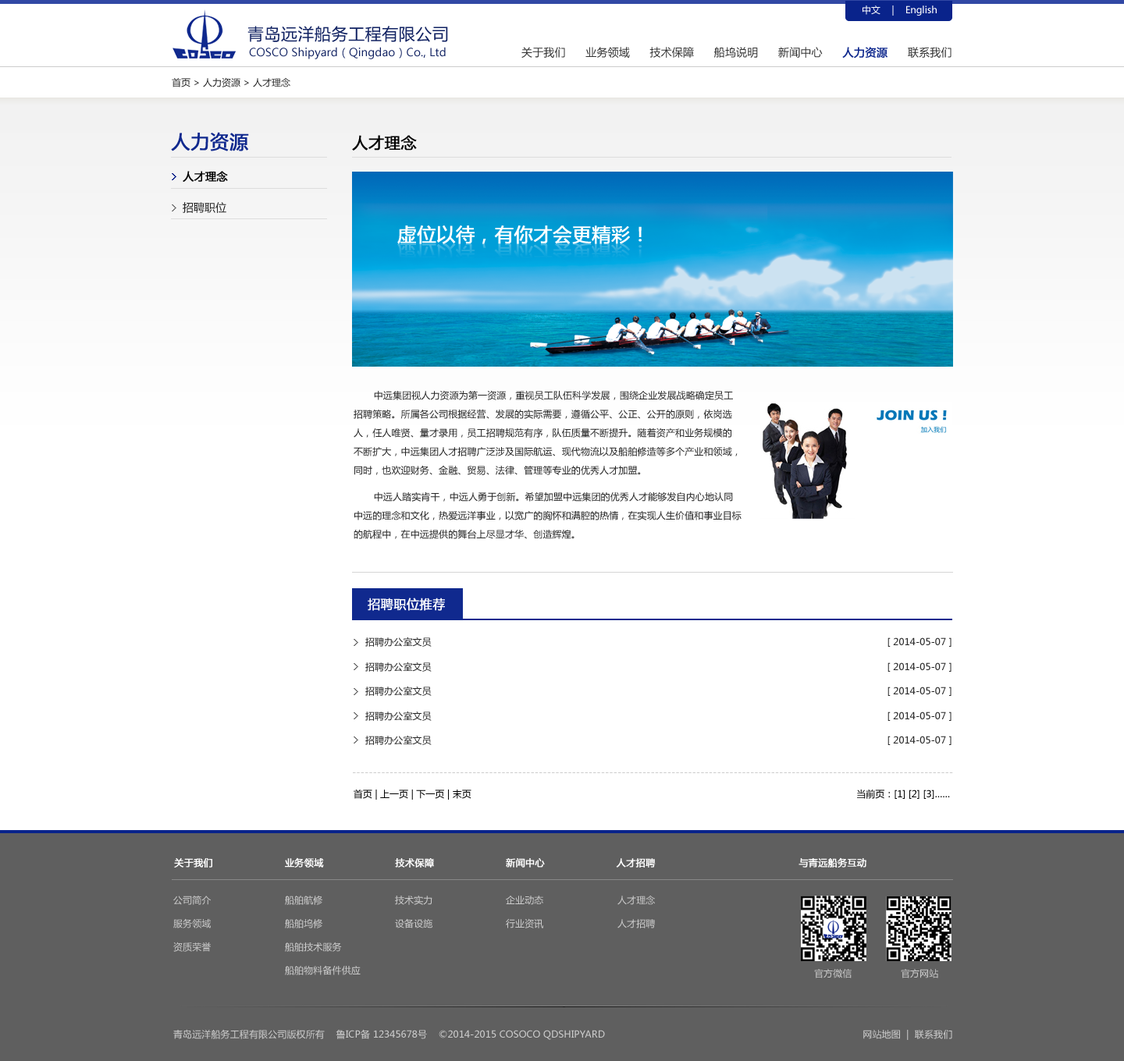
<style>
.page{position:relative;width:1124px;height:1061px;background:#ffffff}
.page>*{position:absolute;margin:0}
.t1{font:9.4px "MicrosoftYaHei";color:#ffffff}
.t2{font:16.4px "MicrosoftYaHei";letter-spacing:0.025em;color:#112262;text-transform:uppercase}
.t3{font:10.9px "MicrosoftYaHei";letter-spacing:0.01em;color:#112262}
.t4{font:10.9px "MicrosoftYaHei";letter-spacing:0.01em;color:#333333;text-transform:uppercase}
.t5{font:10.9px "MicrosoftYaHei";letter-spacing:0.01em;color:#10298e;text-transform:uppercase;font-weight:bold}
.t6{font:9.4px "MicrosoftYaHei";color:#272727}
.t7{font:18.7px "MicrosoftYaHei";letter-spacing:0.01em;color:#10298e;text-transform:uppercase;font-weight:bold}
.t8{font:15.6px "MicrosoftYaHei";letter-spacing:0.01em;color:#000000;text-transform:uppercase;font-weight:bold}
.t9{font:10.9px/31.2px "MicrosoftYaHei";color:#000000;font-weight:bold}
.t10{font:10.9px/31.2px "MicrosoftYaHei";color:#272727}
.t11{font:9.4px/18.7px "MicrosoftYaHei";letter-spacing:0.01em;color:#272727;text-transform:uppercase}
.t12{font:12.5px "MicrosoftYaHei";letter-spacing:0.01em;color:#ffffff;text-transform:uppercase;font-weight:bold}
.t13{font:9.4px "MicrosoftYaHei";letter-spacing:0.01em;color:#272727;text-transform:uppercase}
.t14{font:9.4px "MicrosoftYaHei";letter-spacing:0.01em;color:#cccccc;text-transform:uppercase}
.t15{font:9.4px "MicrosoftYaHei";color:#000000}
.t16{font:9.4px "MicrosoftYaHei";letter-spacing:0.01em;color:#ffffff;text-transform:uppercase;font-weight:bold}
.t17{font:9.4px/23.4px "MicrosoftYaHei";letter-spacing:0.01em;color:#cccccc;text-transform:uppercase}
</style>
<div class="page">
<p class="t1" style="left:862px;top:5px;width:74px;height:11px">中文    |    English</p>
<p class="t2" style="left:247px;top:26px;width:201px;height:16px">青岛远洋船务工程有限公司</p>
<p class="t3" style="left:249px;top:47px;width:197px;height:12px">COSCO Shipyard（Qingdao）Co., Ltd</p>
<p class="t4" style="left:521px;top:47px;width:430px;height:12px">关于我们      业务领域      技术保障      船坞说明      新闻中心      <span class="t5">人力资源</span>      联系我们</p>
<p class="t6" style="left:172px;top:77px;width:118px;height:10px">首页 &gt; 人力资源 &gt; 人才理念</p>
<p class="t7" style="left:171px;top:132px;width:78px;height:19px">人力资源</p>
<p class="t8" style="left:352px;top:135px;width:65px;height:16px">人才理念</p>
<p class="t9" style="left:183px;top:171px;width:45px;height:42px">人才理念<br><span class="t10">招聘职位</span></p>
<p class="t11" style="left:353px;top:390px;width:388px;height:149px">中远集团视人力资源为第一资源，重视员工队伍科学发展，围绕企业发展战略确定员工<br>招聘策略。所属各公司根据经营、发展的实际需要，遵循公平、公正、公开的原则，依岗选<br>人，任人唯贤、量才录用，员工招聘规范有序，队伍质量不断提升。随着资产和业务规模的<br>不断扩大，中远集团人才招聘广泛涉及国际航运、现代物流以及船舶修造等多个产业和领域，<br>同时，也欢迎财务、金融、贸易、法律、管理等专业的优秀人才加盟。<br><br>       中远人踏实肯干，中远人勇于创新。希望加盟中远集团的优秀人才能够发自内心地认同<br>中远的理念和文化，热爱远洋事业，以宽广的胸怀和满腔的热情，在实现人生价值和事业目标<br>的航程中，在中远提供的舞台上尽显才华、创造辉煌。</p>
<p class="t12" style="left:368px;top:598px;width:77px;height:13px">招聘职位推荐</p>
<p class="t13" style="left:365px;top:637px;width:586px;height:10px">招聘办公室文员                                                                                                                                                               [ 2014-05-07 ]</p>
<p class="t13" style="left:365px;top:662px;width:586px;height:10px">招聘办公室文员                                                                                                                                                               [ 2014-05-07 ]</p>
<p class="t13" style="left:365px;top:686px;width:586px;height:10px">招聘办公室文员                                                                                                                                                               [ 2014-05-07 ]</p>
<p class="t13" style="left:365px;top:711px;width:586px;height:10px">招聘办公室文员                                                                                                                                                               [ 2014-05-07 ]</p>
<p class="t13" style="left:365px;top:735px;width:586px;height:10px">招聘办公室文员                                                                                                                                                               [ 2014-05-07 ]</p>
<p class="t14" style="left:353px;top:773px;width:600px;height:0px">-------------------------------------------------------------------------------------------------------------------------------------------------</p>
<p class="t15" style="left:353px;top:790px;width:597px;height:10px">首页 | 上一页 | 下一页 | 末页                                                                                                                                           当前页：[1] [2] [3]……</p>
<p class="t16" style="left:174px;top:858px;width:692px;height:10px">关于我们                       业务领域                       技术保障                       新闻中心                       人才招聘                                              与青远船务互动</p>
<p class="t17" style="left:173px;top:896px;width:38px;height:56px">公司简介<br>服务领域<br>资质荣誉</p>
<p class="t17" style="left:285px;top:896px;width:76px;height:79px">船舶航修<br>船舶坞修<br>船舶技术服务<br>船舶物料备件供应</p>
<p class="t17" style="left:395px;top:896px;width:37px;height:33px">技术实力<br>设备设施</p>
<p class="t17" style="left:506px;top:896px;width:38px;height:33px">企业动态<br>行业资讯</p>
<p class="t17" style="left:617px;top:896px;width:38px;height:33px">人才理念<br>人才招聘</p>
<p class="t14" style="left:814px;top:969px;width:124px;height:10px">官方微信                 官方网站</p>
<p class="t14" style="left:173px;top:1029px;width:779px;height:11px">青岛远洋船务工程有限公司版权所有    鲁ICP备 12345678号    ©2014-2015 COSOCO QDSHIPYARD                                                                                          网站地图  |  联系我们</p>
</div>
